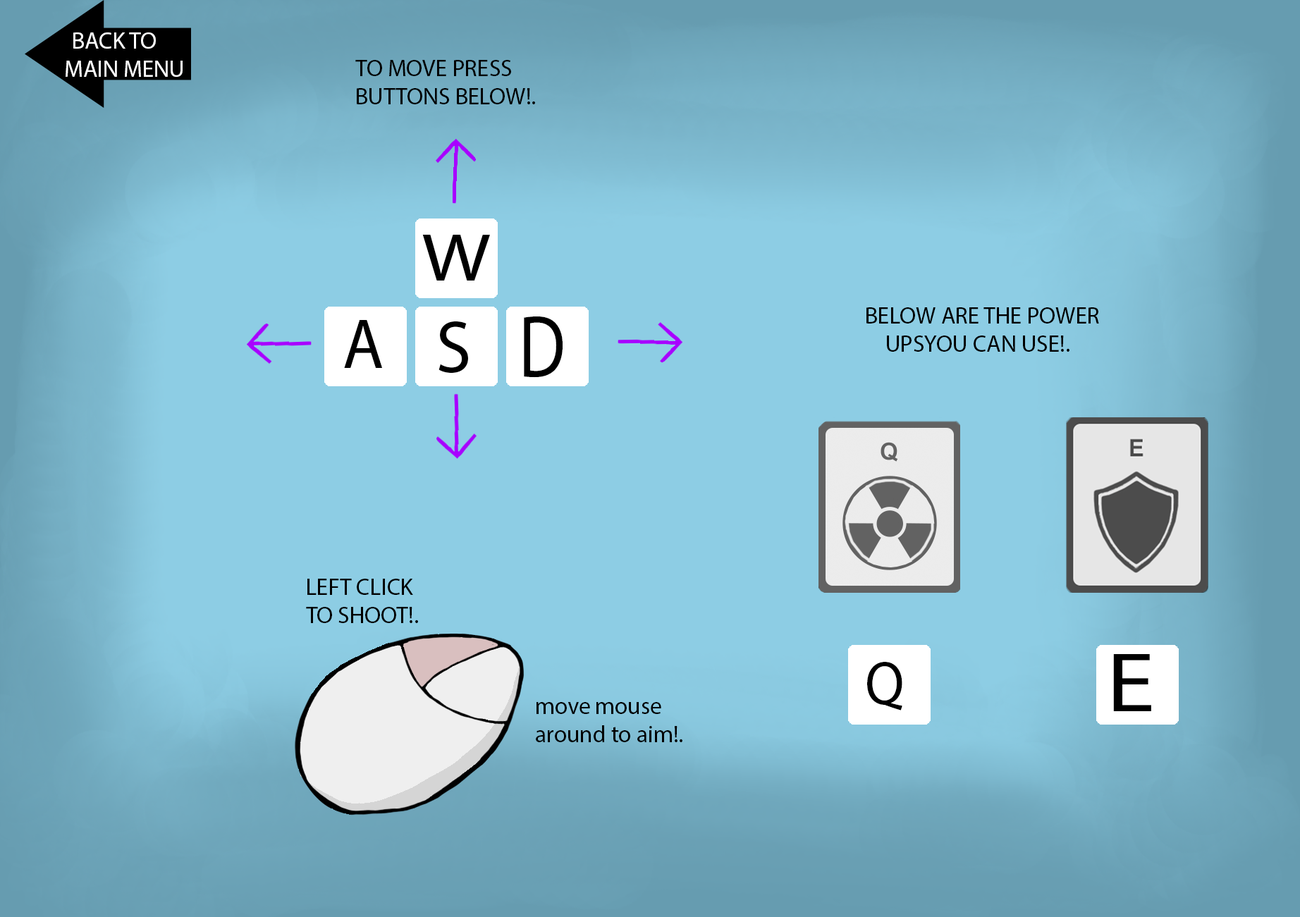
<style>
.page{position:relative;width:1300px;height:917px;background:#8dcde4}
.page>*{position:absolute;margin:0}
.t1{font:23.5px "MyriadPro-Regular";color:#ffffff}
.t2{font:23.5px "MyriadPro-Regular";color:#000000}
.t3{font:67.5px "MyriadPro-Regular";color:#000000;scale:1.21 1}
.t4{font:87.4px "MyriadPro-Regular";color:#000000;scale:0.8 1}
.t5{font:71.6px "MyriadPro-Regular";color:#000000;scale:0.93 1}
.t6{font:74.8px "MyriadPro-Regular";color:#000000;scale:0.96 1}
.t7{font:61.5px "MyriadPro-Regular";color:#000000;scale:0.92 1}
.t8{font:84.5px "MyriadPro-Regular";color:#000000;scale:1.17 1}
</style>
<div class="page">
<p class="t1" style="left:66px;top:32px;width:117px;height:45px">BACK TO<br>MAIN MENU</p>
<p class="t2" style="left:355px;top:60px;width:180px;height:44px">TO MOVE PRESS<br>BUTTONS BELOW!.</p>
<p class="t3" style="left:422px;top:235px;width:68px;height:46px">W</p>
<p class="t4" style="left:524px;top:317px;width:39px;height:61px">D</p>
<p class="t2" style="left:866px;top:307px;width:233px;height:45px">BELOW ARE THE POWER <br>    UPSYOU CAN USE!.</p>
<p class="t5" style="left:344px;top:320px;width:38px;height:48px">A</p>
<p class="t6" style="left:439px;top:321px;width:29px;height:53px">S</p>
<p class="t2" style="left:306px;top:579px;width:112px;height:44px">LEFT CLICK <br>TO SHOOT!.</p>
<p class="t7" style="left:867px;top:662px;width:35px;height:49px">Q</p>
<p class="t8" style="left:1113px;top:654px;width:38px;height:57px">E</p>
<p class="t2" style="left:536px;top:702px;width:146px;height:40px">move mouse <br>around to aim!.</p>
</div>
